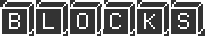
<style>
.page{position:relative;width:205px;height:36px;background:#333333}
.page>*{position:absolute;margin:0}
.t1{font:36px "Baby-blocks";letter-spacing:-0.2em;color:#ffffff}
</style>
<div class="page">
<p class="t1" style="left:0px;top:0px;width:205px;height:36px">BLOCKS</p>
</div>
